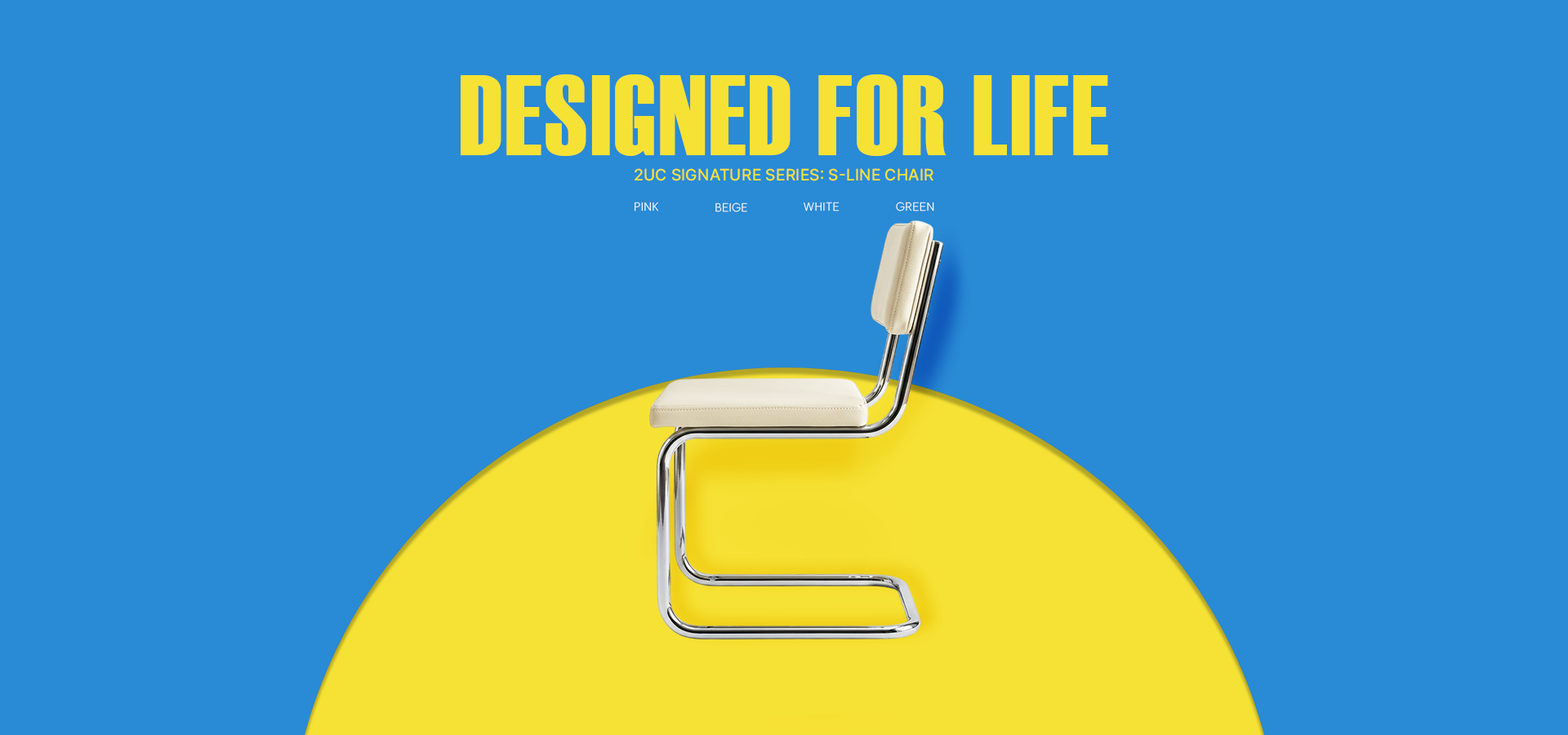
<style>
.page{position:relative;width:1568px;height:735px;background:#298ad5}
.page>*{position:absolute;margin:0}
.t1{font:114.3px "Haettenschweiler";letter-spacing:0.02em;color:#f6e235}
.t2{font:16.3px "Pretendard-Medium";color:#f6e235;text-transform:uppercase}
.t3{font:11.4px "SUIT-ExtraLight";letter-spacing:0.02em;color:#ffffff;text-transform:uppercase}
</style>
<div class="page">
<p class="t1" style="left:461px;top:74px;width:647px;height:82px">DESIGNED FOR LIFE</p>
<p class="t2" style="left:635px;top:168px;width:298px;height:13px">2UC Signature Series: S-Line Chair</p>
<p class="t3" style="left:635px;top:202px;width:23px;height:10px">pink</p>
<p class="t3" style="left:715px;top:203px;width:32px;height:9px">beige</p>
<p class="t3" style="left:804px;top:202px;width:36px;height:10px">white</p>
<p class="t3" style="left:896px;top:202px;width:38px;height:10px">green</p>
</div>
